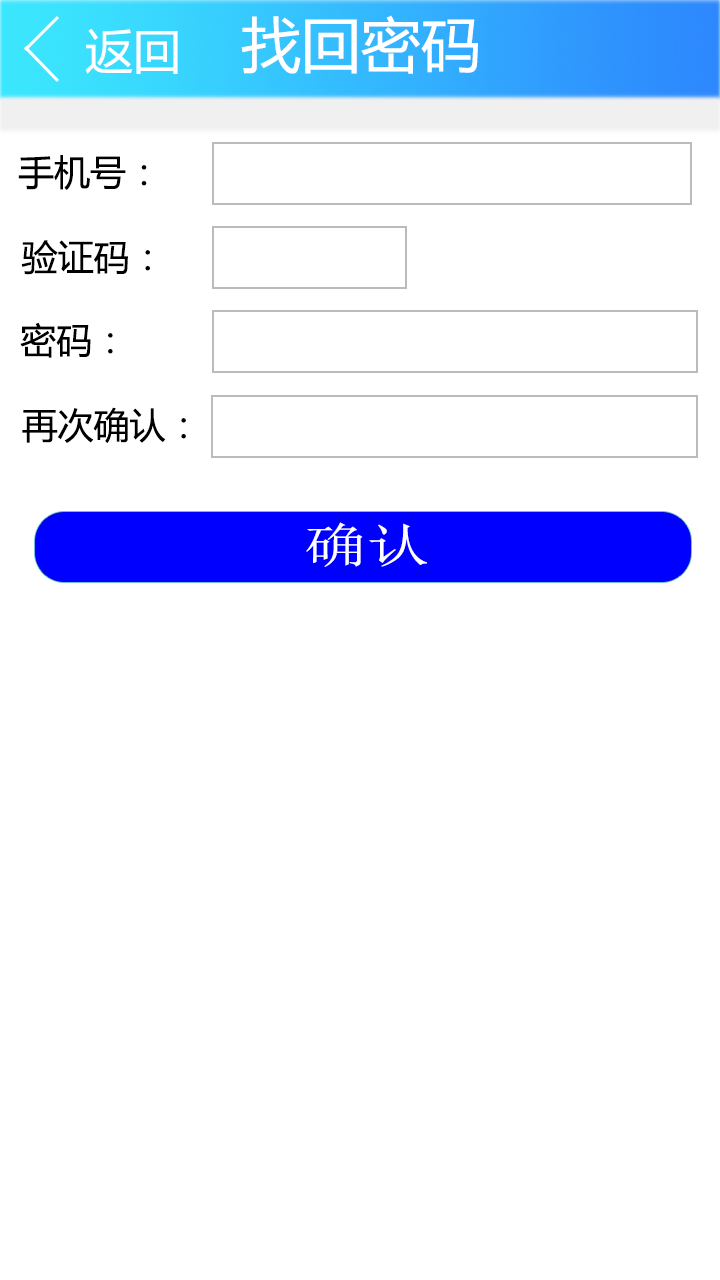
<style>
.page{position:relative;width:720px;height:1280px;background:#ffffff}
.page>*{position:absolute;margin:0}
.t1{font:60px "MicrosoftYaHei";color:#ffffff}
.t2{font:48px "MicrosoftYaHei";color:#ffffff}
.t3{font:36px "MicrosoftYaHei";color:#000000}
.t4{font:48px "NSimSun";color:#fffefe;scale:1.31 1}
</style>
<div class="page">
<p class="t1" style="left:241px;top:15px;width:237px;height:59px">找回密码</p>
<p class="t2" style="left:85px;top:28px;width:93px;height:46px">返回</p>
<p class="t3" style="left:18px;top:155px;width:129px;height:35px">手机号：</p>
<p class="t3" style="left:21px;top:240px;width:129px;height:35px">验证码：</p>
<p class="t3" style="left:20px;top:322px;width:93px;height:36px">密码：</p>
<p class="t3" style="left:22px;top:407px;width:164px;height:36px">再次确认：</p>
<p class="t4" style="left:306px;top:522px;width:121px;height:45px">确认</p>
</div>
